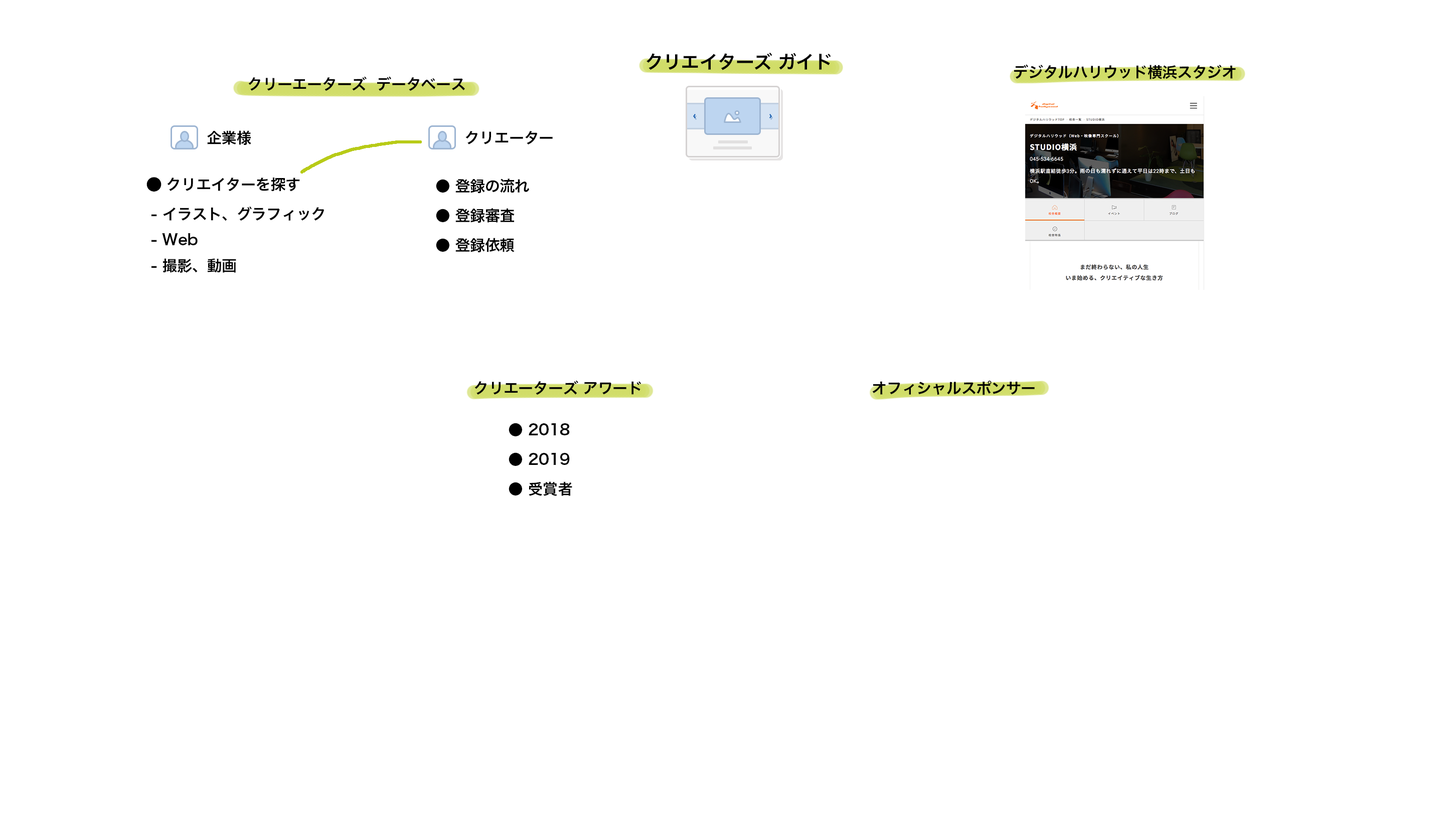
<style>
.page{position:relative;width:1456px;height:819px;background:#ffffff}
.page>*{position:absolute;margin:0}
.t1{font:18.3px "HiraKakuProN-W6";letter-spacing:-0.01em;color:#000000}
.t2{font:15px "HiraKakuProN-W6";letter-spacing:-0.01em;color:#000000}
.t3{font:15px/25.7px "HiraKakuProN-W6";letter-spacing:-0.01em;color:#000000}
.t4{font:15px/29.7px "HiraKakuProN-W6";letter-spacing:-0.01em;color:#000000}
.t5{font:15px/27.2px "HiraKakuProN-W6";letter-spacing:-0.01em;color:#000000}
</style>
<div class="page">
<p class="t1" style="left:646px;top:53px;width:185px;height:17px">クリエイターズ ガイド</p>
<p class="t2" style="left:1014px;top:64px;width:222px;height:15px">デジタルハリウッド横浜スタジオ</p>
<p class="t2" style="left:248px;top:76px;width:217px;height:15px">クリーエーターズ  データベース</p>
<p class="t2" style="left:207px;top:130px;width:44px;height:15px">企業様</p>
<p class="t2" style="left:465px;top:131px;width:88px;height:14px">クリエーター</p>
<p class="t3" style="left:146px;top:177px;width:178px;height:96px"><span class="t4">⃝ クリエイターを探す<br> </span>- イラスト、グラフィック<br> - Web<br> - 撮影、動画</p>
<p class="t5" style="left:436px;top:179px;width:93px;height:73px"><span class="t4">● </span>登録の流れ<br><span class="t4">● </span>登録審査<br><span class="t4">● </span>登録依頼</p>
<p class="t2" style="left:474px;top:380px;width:167px;height:15px">クリエーターズ アワード</p>
<p class="t2" style="left:872px;top:381px;width:163px;height:14px">オフィシャルスポンサー</p>
<p class="t5" style="left:509px;top:423px;width:63px;height:73px"><span class="t4">● </span>2018<br><span class="t4">● </span>2019<br>● 受賞者</p>
</div>
